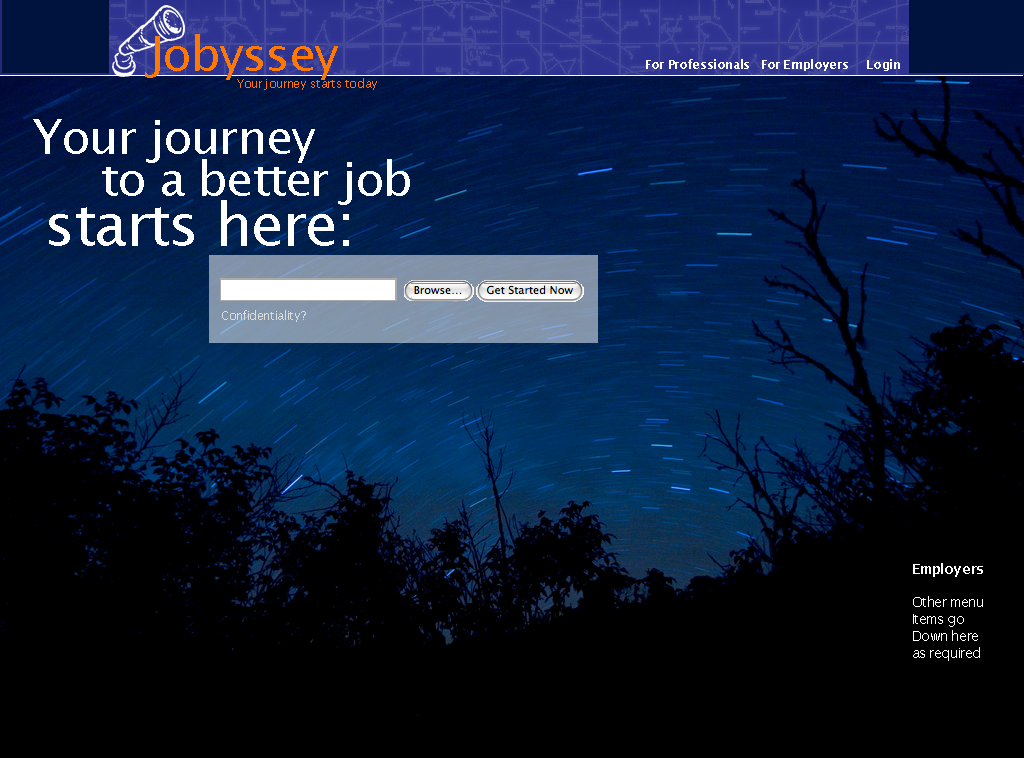
<style>
.page{position:relative;width:1024px;height:758px;background:#000000}
.page>*{position:absolute;margin:0}
.t1{font:48px "LucidaSans";letter-spacing:-0.03em;color:#ffffff}
.t2{font:60px "LucidaSans";letter-spacing:-0.03em;color:#ffffff}
.t3{font:12px "LucidaSans";letter-spacing:-0.03em;color:#dddddd}
.t4{font:14px "LucidaSans";letter-spacing:-0.03em;color:#ffffff}
.t5{font:14px "LucidaSans-Demi";letter-spacing:-0.03em;color:#ffffff}
</style>
<div class="page">
<p class="t1" style="left:33px;top:119px;width:282px;height:44px">Your journey</p>
<p class="t1" style="left:102px;top:159px;width:308px;height:46px">to a better job</p>
<p class="t2" style="left:49px;top:200px;width:300px;height:46px">starts here:</p>
<p class="t3" style="left:222px;top:310px;width:84px;height:12px">Confidentiality?</p>
<p class="t4" style="left:913px;top:563px;width:70px;height:98px;text-align:justify"><span class="t5">Employers<br><br></span>Other menu<br>Items go<br>Down here<br>as required</p>
</div>
